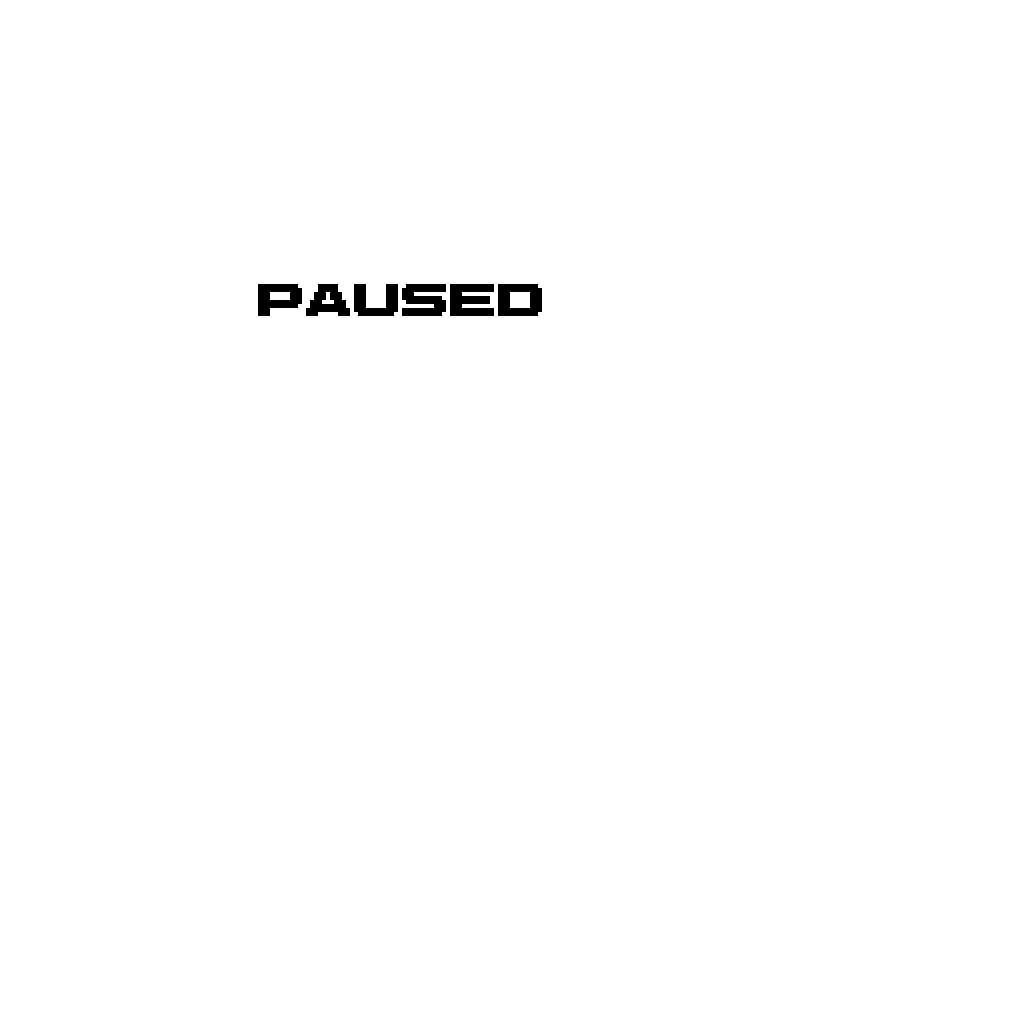
<style>
.page{position:relative;width:1024px;height:1024px;background:#ffffff}
.page>*{position:absolute;margin:0}
.t1{font:32px "M42_FLIGHT-721";color:#000000}
</style>
<div class="page">
<p class="t1" style="left:258px;top:284px;width:284px;height:32px">PAUSED</p>
</div>
